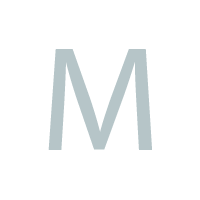
<style>
.page{position:relative;width:200px;height:200px;background:#ffffff}
.page>*{position:absolute;margin:0}
.t1{font:150px "MyriadPro-Regular";color:#b6c5c8}
</style>
<div class="page">
<p class="t1" style="left:48px;top:49px;width:104px;height:101px">M</p>
</div>
